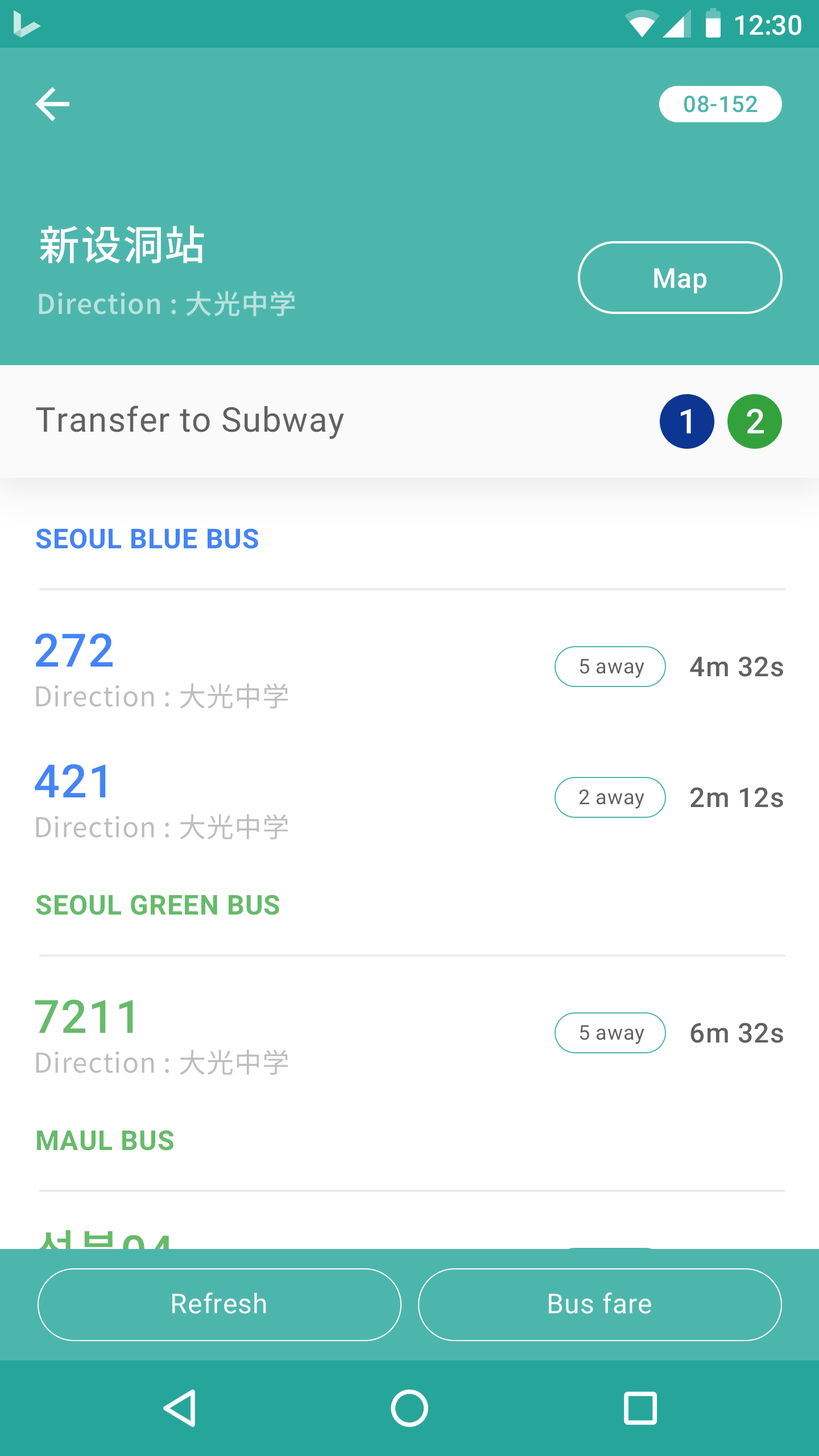
<style>
.page{position:relative;width:819px;height:1456px;background:#ffffff}
.page>*{position:absolute;margin:0}
.t1{font:27.3px "Roboto-Medium";color:#ffffff}
.t2{font:22.7px "Roboto-Medium";letter-spacing:0.025em;color:#4db6ac}
.t3{font:40.9px "NotoSansCJKkr-Medium";letter-spacing:0.025em;color:#ffffff}
.t4{font:27.3px "Roboto-Medium";letter-spacing:0.025em;color:#fafafa}
.t5{font:27.3px "NotoSansCJKkr-Medium";letter-spacing:0.025em;color:#b8e2de}
.t6{font:34.1px "Roboto-Regular";letter-spacing:0.025em;color:#616161}
.t7{font:34.1px "Roboto-Medium";letter-spacing:0.025em;color:#ffffff}
.t8{font:27.3px "Roboto-Bold";letter-spacing:0.025em;color:#4484f6}
.t9{font:46.1px "Roboto-Medium";letter-spacing:0.025em;color:#4484f6}
.t10{font:20.5px "Roboto-Regular";letter-spacing:0.025em;color:#616161}
.t11{font:27.3px "Roboto-Medium";letter-spacing:0.025em;color:#616161}
.t12{font:27.3px "NotoSansCJKkr-Regular";letter-spacing:0.025em;color:#bdbdbd}
.t13{font:27.3px "Roboto-Bold";letter-spacing:0.025em;color:#66bb6a}
.t14{font:46.1px "Roboto-Medium";letter-spacing:0.025em;color:#66bb6a}
.t15{font:46.1px "NotoSansCJKkr-Medium";letter-spacing:0.025em}
.t16{font:46.1px "Roboto-Medium";letter-spacing:0.025em}
.t17{font:27.3px "Roboto-Regular";letter-spacing:0.025em;color:#fafafa}
</style>
<div class="page">
<p class="t1" style="left:735px;top:15px;width:66px;height:20px">12:30</p>
<p class="t2" style="left:684px;top:96px;width:74px;height:17px">08-152</p>
<p class="t3" style="left:40px;top:225px;width:164px;height:38px">新设洞站</p>
<p class="t4" style="left:654px;top:268px;width:53px;height:25px">Map</p>
<p class="t5" style="left:39px;top:291px;width:256px;height:25px">Direction : 大光中学</p>
<p class="t6" style="left:36px;top:406px;width:308px;height:33px">Transfer to Subway</p>
<p class="t7" style="left:681px;top:409px;width:10px;height:24px">1</p>
<p class="t7" style="left:747px;top:408px;width:17px;height:25px">2</p>
<p class="t8" style="left:36px;top:528px;width:222px;height:21px">SEOUL BLUE BUS</p>
<p class="t9" style="left:35px;top:633px;width:78px;height:34px">272</p>
<p class="t10" style="left:580px;top:659px;width:64px;height:19px">5 away</p>
<p class="t11" style="left:690px;top:656px;width:93px;height:21px">4m 32s</p>
<p class="t12" style="left:36px;top:683px;width:252px;height:26px">Direction : 大光中学</p>
<p class="t9" style="left:35px;top:764px;width:71px;height:33px">421</p>
<p class="t10" style="left:579px;top:789px;width:65px;height:20px">2 away</p>
<p class="t11" style="left:690px;top:787px;width:93px;height:21px">2m 12s</p>
<p class="t12" style="left:36px;top:814px;width:252px;height:25px">Direction : 大光中学</p>
<p class="t13" style="left:36px;top:895px;width:243px;height:20px">SEOUL GREEN BUS</p>
<p class="t14" style="left:35px;top:999px;width:98px;height:34px">7211</p>
<p class="t10" style="left:580px;top:1025px;width:64px;height:19px">5 away</p>
<p class="t11" style="left:690px;top:1023px;width:93px;height:20px">6m 32s</p>
<p class="t12" style="left:36px;top:1049px;width:252px;height:26px">Direction : 大光中学</p>
<p class="t13" style="left:37px;top:1130px;width:136px;height:21px">MAUL BUS</p>
<p class="t15" style="left:35px;top:1230px;width:138px;height:42px">성북<span class="t16">04</span></p>
<p class="t17" style="left:172px;top:1292px;width:94px;height:22px">Refresh</p>
<p class="t17" style="left:549px;top:1292px;width:102px;height:22px">Bus fare</p>
</div>
